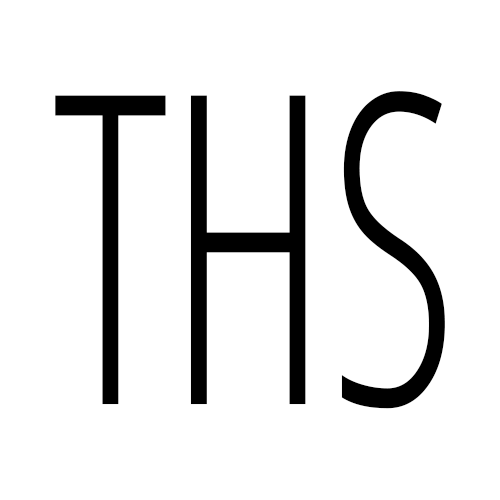
<style>
.page{position:relative;width:500px;height:500px;background:#ffffff}
.page>*{position:absolute;margin:0}
.t1{font:431.6px "OpenSansCondensed-Light";letter-spacing:-0.009em;color:#000000;scale:0.77 1}
</style>
<div class="page">
<p class="t1" style="left:55px;top:91px;width:390px;height:318px">THS</p>
</div>
